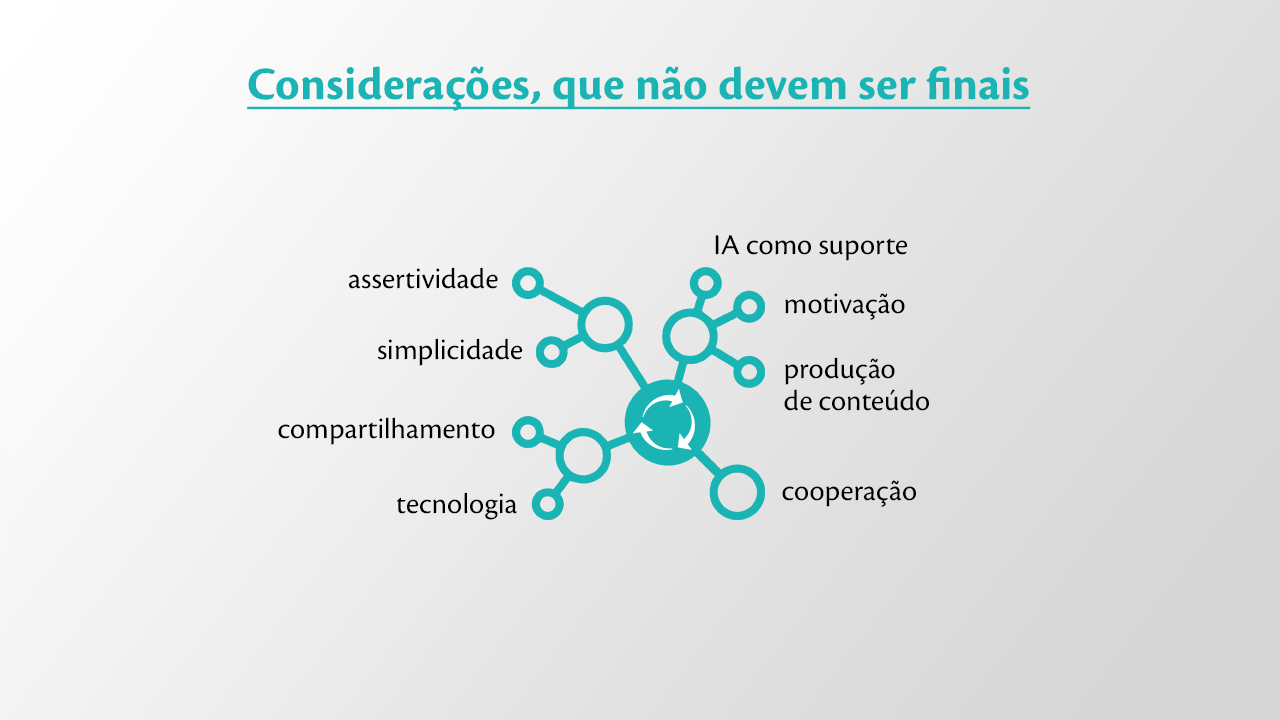
<style>
.page{position:relative;width:1280px;height:720px}
.page>*{position:absolute;margin:0}
.t1{font:48px "CronosPro-Bold";color:#1ab4b4;text-decoration:underline}
.t2{font:30px "CronosPro-Regular";color:#000000}
.t3{font:29.8px "CronosPro-Regular";color:#000000}
.t4{font:30px/32px "CronosPro-Regular";color:#000000}
</style>
<div class="page">
<p class="t1" style="left:247px;top:66px;width:784px;height:45px">Considerações, que não devem ser finais</p>
<p class="t2" style="left:715px;top:235px;width:193px;height:26px">IA como suporte</p>
<p class="t3" style="left:348px;top:267px;width:150px;height:22px">assertividade</p>
<p class="t2" style="left:785px;top:293px;width:120px;height:27px">motivação</p>
<p class="t3" style="left:378px;top:338px;width:145px;height:28px">simplicidade</p>
<p class="t4" style="left:784px;top:357px;width:145px;height:54px">produção <br>de conteúdo</p>
<p class="t2" style="left:278px;top:417px;width:217px;height:28px">compartilhamento</p>
<p class="t2" style="left:782px;top:480px;width:134px;height:27px">cooperação</p>
<p class="t3" style="left:396px;top:492px;width:121px;height:28px">tecnologia</p>
</div>
